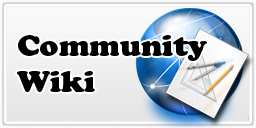
<style>
.page{position:relative;width:256px;height:128px}
.page>*{position:absolute;margin:0}
.t1{font:30px "CooperBlackStd";color:#000000}
</style>
<div class="page">
<p class="t1" style="left:17px;top:35px;width:190px;height:57px">Community<br>Wiki</p>
</div>
